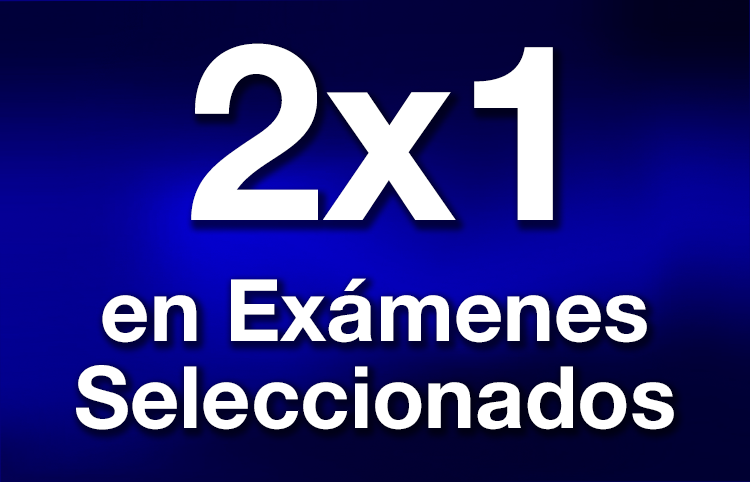
<style>
.page{position:relative;width:750px;height:482px}
.page>*{position:absolute;margin:0}
.t1{font:246.7px "HelveticaNeue-Bold";color:#ffffff}
.t2{font:86px/67px "HelveticaNeue-Bold";color:#ffffff}
</style>
<div class="page">
<p class="t1" style="left:191px;top:43px;width:362px;height:177px">2x1</p>
<p class="t2" style="left:76px;top:278px;width:598px;height:152px;text-align:center">en Exámenes<br>Seleccionados</p>
</div>
